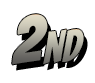
<style>
.page{position:relative;width:95px;height:83px;background:#ffffff}
.page>*{position:absolute;margin:0}
.t1{font:43.6px "Bangers-Regular"}
</style>
<div class="page">
<p class="t1" style="left:43px;top:29px;width:41px;height:36px;rotate:-5deg">nd</p>
</div>
